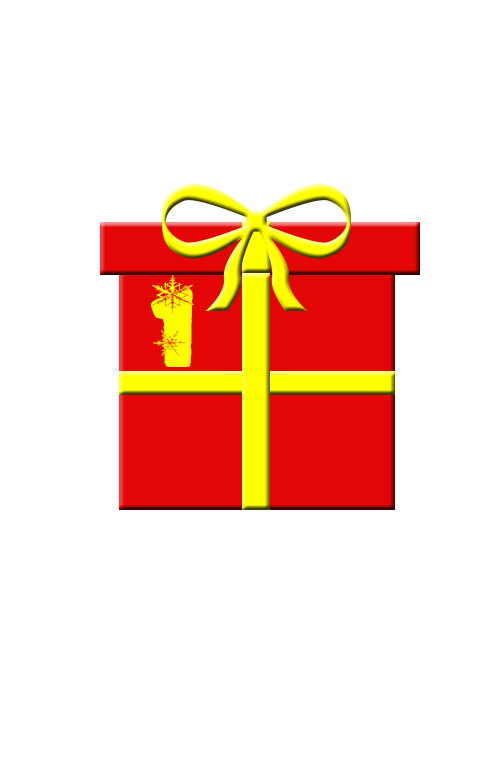
<style>
.page{position:relative;width:500px;height:760px;background:#ffffff}
.page>*{position:absolute;margin:0}
.t1{font:125.3px "winterflakes";color:#ffff00;scale:1.15 1}
</style>
<div class="page">
<p class="t1" style="left:151px;top:275px;width:43px;height:92px">1</p>
</div>
